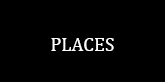
<style>
.page{position:relative;width:165px;height:82px;background:#000000}
.page>*{position:absolute;margin:0}
.t1{font:19.1px "Cambria";color:#ffffff}
</style>
<div class="page">
<p class="t1" style="left:51px;top:38px;width:63px;height:13px">PLACES</p>
</div>
